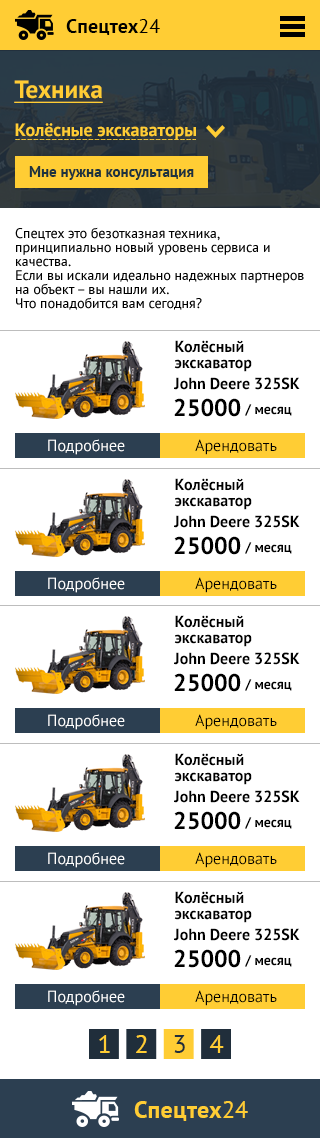
<style>
.page{position:relative;width:320px;height:1138px;background:#ffffff}
.page>*{position:absolute;margin:0}
.t1{font:20px "PTSans-Bold";letter-spacing:0.01em;color:#000000}
.t2{font:20px "PTSans-Regular";letter-spacing:0.01em;color:#000000}
.t3{font:25px "PTSans-Bold";color:#ffcd34;text-decoration:underline}
.t4{font:18px "PTSans-Bold";color:#ffcd34}
.t5{font:15px "PTSans-Bold";color:#1d333f}
.t6{font:14px/14px "PTSans-Regular";color:#000000}
.t7{font:16px/16px "PTSans-Bold";color:#000000}
.t8{font:16px "PTSans-Bold";color:#000000}
.t9{font:24px "PTSans-Bold";color:#000000}
.t10{font:14px "PTSans-Bold";color:#000000}
.t11{font:16px "PTSans-Regular";color:#ffffff}
.t12{font:16px "PTSans-Regular";color:#000000}
.t13{font:26px "PTSans-Regular";color:#ffcd34}
.t14{font:26px "PTSans-Regular";color:#202e3b}
.t15{font:24px "PTSans-Bold";letter-spacing:0.01em;color:#ffcd34}
.t16{font:24px "PTSans-Regular";letter-spacing:0.01em;color:#ffcd34}
</style>
<div class="page">
<p class="t1" style="left:66px;top:19px;width:94px;height:16px">Спецтех<span class="t2">24</span></p>
<p class="t3" style="left:14px;top:80px;width:89px;height:23px">Техника</p>
<p class="t4" style="left:15px;top:123px;width:181px;height:17px">Колёсные экскаваторы</p>
<p class="t5" style="left:29px;top:166px;width:165px;height:14px">Мне нужна консультация</p>
<p class="t6" style="left:15px;top:227px;width:289px;height:83px">Спецтех это безотказная техника, принципиально новый уровень сервиса и качества. <br>Если вы искали идеально надежных партнеров на объект – вы нашли их. <br>Что понадобится вам сегодня?</p>
<p class="t7" style="left:174px;top:340px;width:78px;height:32px">Колёсный <br>экскаватор</p>
<p class="t8" style="left:174px;top:377px;width:126px;height:13px">John Deere 325SK</p>
<p class="t9" style="left:174px;top:398px;width:67px;height:19px">25000</p>
<p class="t10" style="left:245px;top:404px;width:47px;height:12px">/ месяц</p>
<p class="t11" style="left:48px;top:439px;width:77px;height:16px">Подробнее</p>
<p class="t12" style="left:195px;top:439px;width:82px;height:16px">Арендовать</p>
<p class="t7" style="left:174px;top:478px;width:78px;height:32px">Колёсный <br>экскаватор</p>
<p class="t8" style="left:174px;top:515px;width:126px;height:13px">John Deere 325SK</p>
<p class="t9" style="left:174px;top:536px;width:67px;height:19px">25000</p>
<p class="t10" style="left:245px;top:542px;width:47px;height:12px">/ месяц</p>
<p class="t11" style="left:48px;top:577px;width:77px;height:16px">Подробнее</p>
<p class="t12" style="left:195px;top:577px;width:82px;height:16px">Арендовать</p>
<p class="t7" style="left:174px;top:615px;width:78px;height:32px">Колёсный <br>экскаватор</p>
<p class="t8" style="left:174px;top:652px;width:126px;height:13px">John Deere 325SK</p>
<p class="t9" style="left:174px;top:673px;width:67px;height:19px">25000</p>
<p class="t10" style="left:245px;top:679px;width:47px;height:12px">/ месяц</p>
<p class="t11" style="left:48px;top:714px;width:77px;height:16px">Подробнее</p>
<p class="t12" style="left:195px;top:714px;width:82px;height:16px">Арендовать</p>
<p class="t7" style="left:174px;top:753px;width:78px;height:32px">Колёсный <br>экскаватор</p>
<p class="t8" style="left:174px;top:790px;width:126px;height:13px">John Deere 325SK</p>
<p class="t9" style="left:174px;top:811px;width:67px;height:19px">25000</p>
<p class="t10" style="left:245px;top:817px;width:47px;height:12px">/ месяц</p>
<p class="t11" style="left:48px;top:852px;width:77px;height:16px">Подробнее</p>
<p class="t12" style="left:195px;top:852px;width:82px;height:16px">Арендовать</p>
<p class="t7" style="left:174px;top:891px;width:78px;height:32px">Колёсный <br>экскаватор</p>
<p class="t8" style="left:174px;top:928px;width:126px;height:13px">John Deere 325SK</p>
<p class="t9" style="left:174px;top:949px;width:67px;height:19px">25000</p>
<p class="t10" style="left:245px;top:955px;width:47px;height:12px">/ месяц</p>
<p class="t11" style="left:48px;top:990px;width:77px;height:16px">Подробнее</p>
<p class="t12" style="left:195px;top:990px;width:82px;height:16px">Арендовать</p>
<p class="t13" style="left:99px;top:1035px;width:11px;height:18px">1</p>
<p class="t13" style="left:136px;top:1035px;width:11px;height:18px">2</p>
<p class="t14" style="left:174px;top:1035px;width:11px;height:18px">3</p>
<p class="t13" style="left:209px;top:1035px;width:15px;height:18px">4</p>
<p class="t15" style="left:134px;top:1101px;width:114px;height:20px">Спецтех<span class="t16">24</span></p>
</div>
